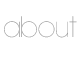
<style>
.page{position:relative;width:81px;height:60px;background:#ffffff}
.page>*{position:absolute;margin:0}
.t1{font:20.8px "BondoluoPeek";color:#9a9a9a}
</style>
<div class="page">
<p class="t1" style="left:4px;top:16px;width:73px;height:22px">About</p>
</div>
